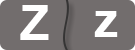
<style>
.page{position:relative;width:135px;height:50px;background:#726d6d}
.page>*{position:absolute;margin:0}
.t1{font:48px "Arial-BoldMT";color:#ffffff}
</style>
<div class="page">
<p class="t1" style="left:20px;top:5px;width:29px;height:35px">Z</p>
<p class="t1" style="left:94px;top:11px;width:24px;height:26px">z</p>
</div>
